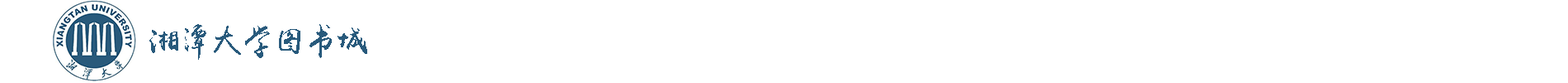
<style>
.page{position:relative;width:1568px;height:83px;background:#ffffff}
.page>*{position:absolute;margin:0}
.t1{font:30.9px "yuweij";color:#285a7c}
</style>
<div class="page">
<p class="t1" style="left:149px;top:24px;width:218px;height:35px">湘潭大学图书城</p>
</div>
